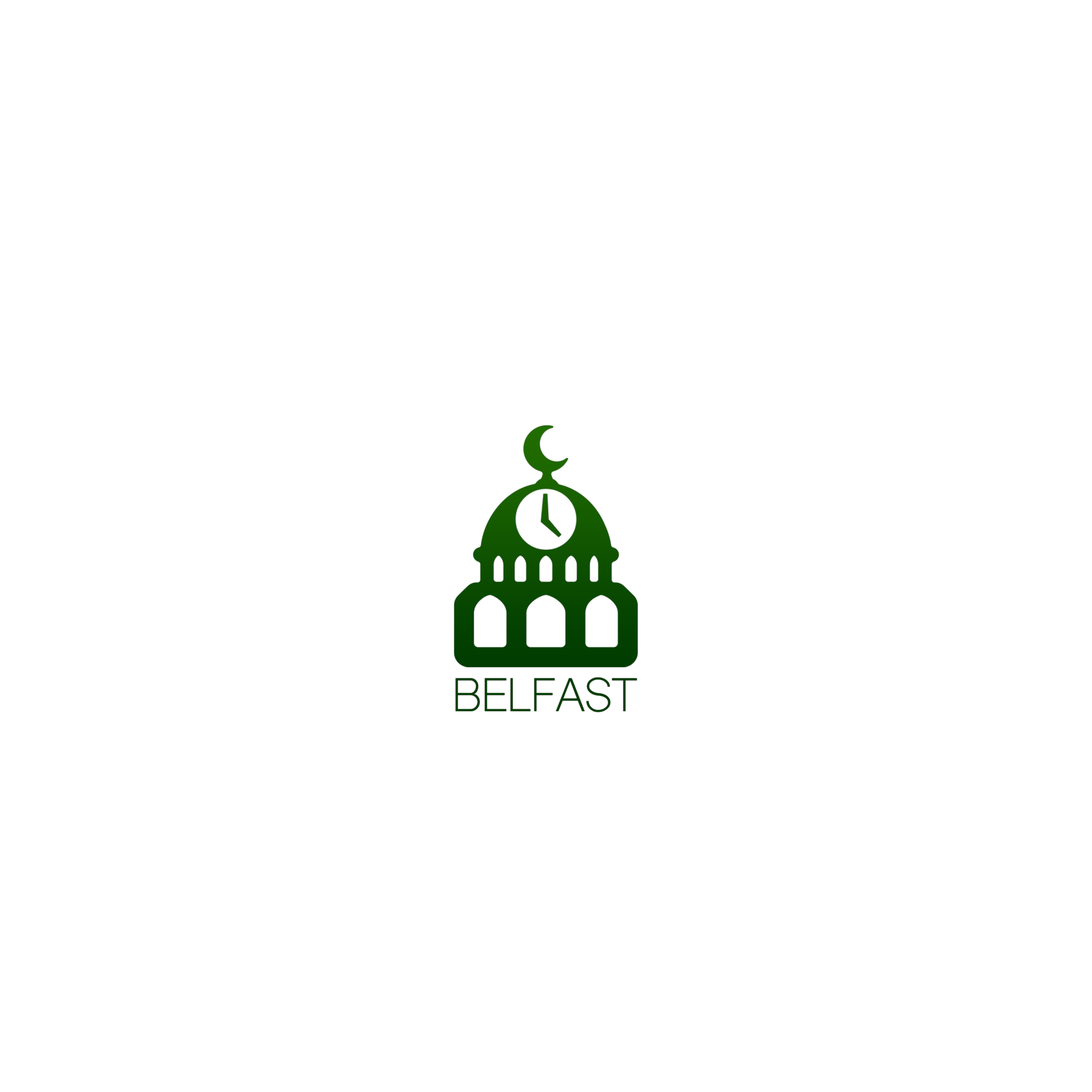
<style>
.page{position:relative;width:1092px;height:1092px;background:#ffffff}
.page>*{position:absolute;margin:0}
.t1{font:44.8px "ShreeDev0714";color:#013e00}
</style>
<div class="page">
<p class="t1" style="left:455px;top:677px;width:182px;height:35px">BELFAST</p>
</div>
